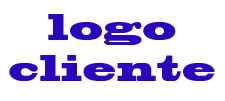
<style>
.page{position:relative;width:225px;height:101px;background:#ffffff}
.page>*{position:absolute;margin:0}
.t1{font:34px "BlackoakStd";letter-spacing:0.023em;color:#2a07bd;scale:0.74 1}
</style>
<div class="page">
<p class="t1" style="left:9px;top:14px;width:206px;height:67px;text-align:center">logo<br>cliente</p>
</div>
